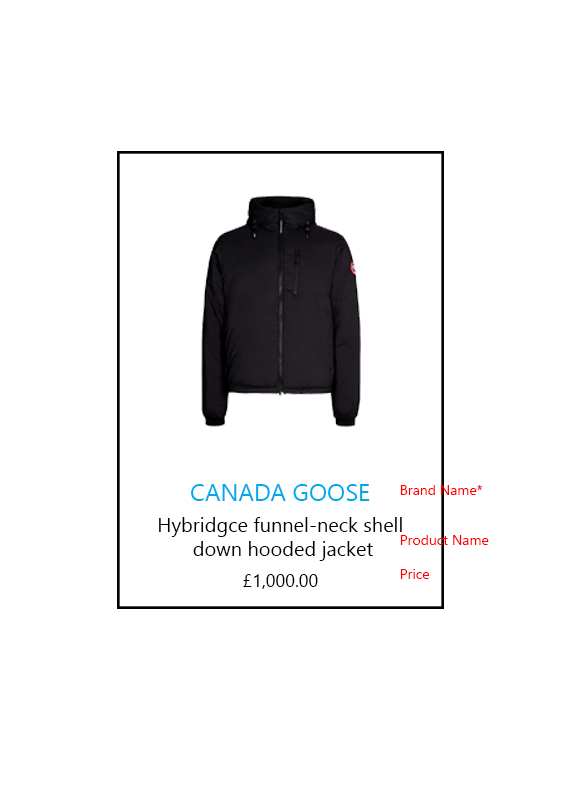
<style>
.page{position:relative;width:579px;height:811px;background:#ffffff}
.page>*{position:absolute;margin:0}
.t1{font:24px "Gadugi";color:#00a8ec}
.t2{font:14px "Gadugi";color:#ff0000}
.t3{font:20px "Gadugi";color:#000000}
.t4{font:18px "Gadugi";color:#000000}
</style>
<div class="page">
<p class="t1" style="left:191px;top:484px;width:179px;height:17px">CANADA GOOSE</p>
<p class="t2" style="left:400px;top:485px;width:89px;height:94px">Brand Name*<br><br><br>Product Name<br><br>Price</p>
<p class="t3" style="left:159px;top:517px;width:243px;height:44px;text-align:center">Hybridgce funnel-neck shell <br>down hooded jacket</p>
<p class="t4" style="left:243px;top:574px;width:75px;height:15px">£1,000.00</p>
</div>
